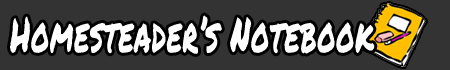
<style>
.page{position:relative;width:450px;height:70px;background:#333333}
.page>*{position:absolute;margin:0}
.t1{font:48px "PermanentMarker";letter-spacing:0.025em;color:#ffffff;scale:0.6 1}
</style>
<div class="page">
<p class="t1" style="left:10px;top:15px;width:365px;height:39px">Homesteader’s Notebook</p>
</div>
